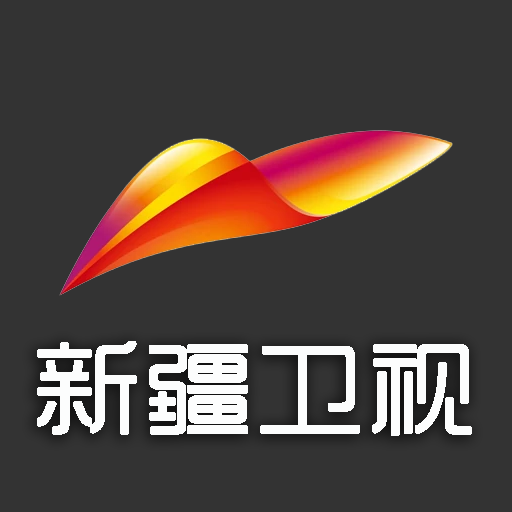
<style>
.page{position:relative;width:512px;height:512px;background:#333333}
.page>*{position:absolute;margin:0}
.t1{font:106.7px "SJshishang-Regular";letter-spacing:0.02em;color:#fcfdfd;font-weight:bold}
</style>
<div class="page">
<p class="t1" style="left:37px;top:341px;width:435px;height:95px">新疆卫视</p>
</div>
